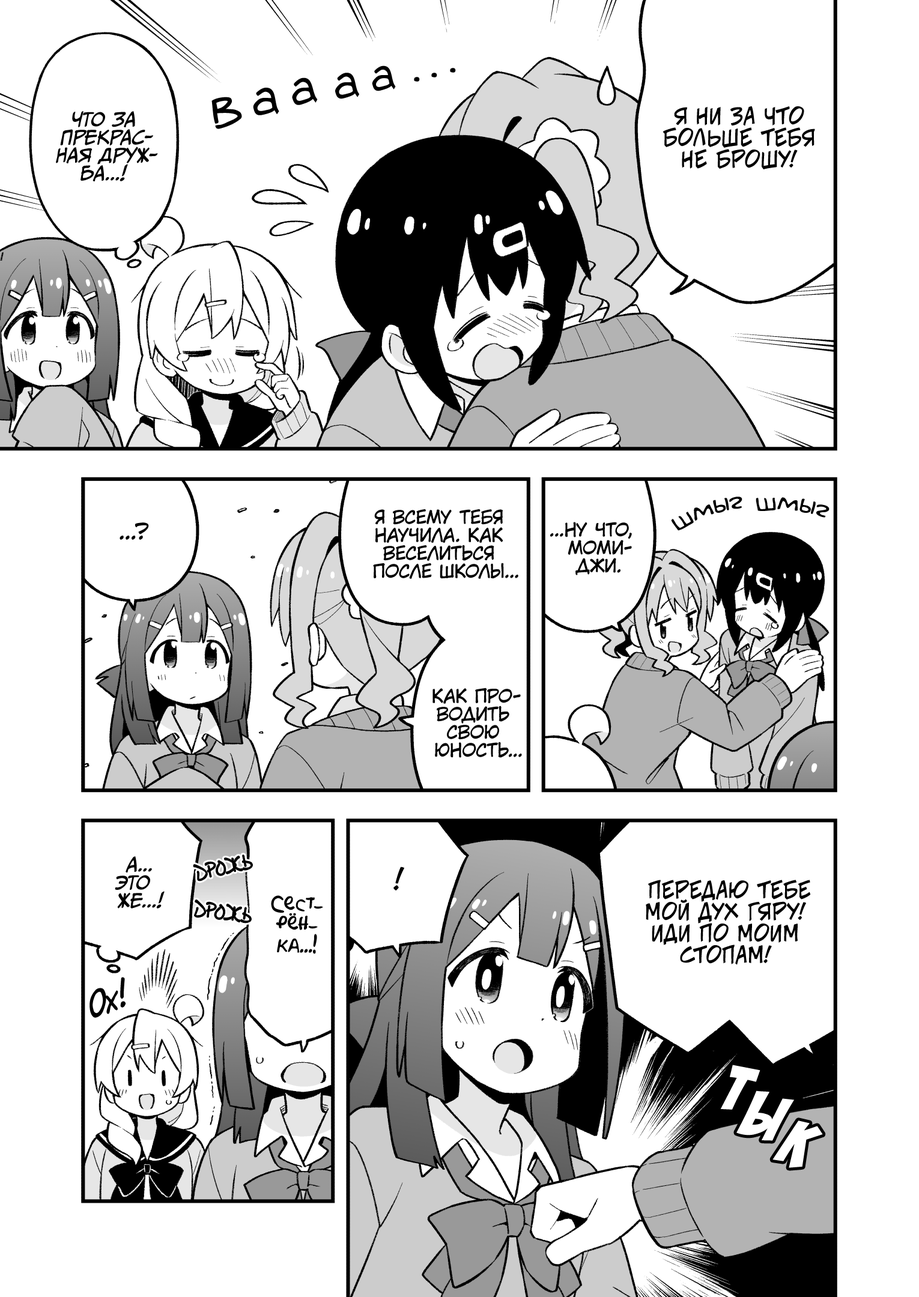
<style>
.page{position:relative;width:919px;height:1297px;background:#ffffff}
.page>*{position:absolute;margin:0}
.t1{font:46.9px "v_Augie";color:#000000}
.t2{font:50.5px "v_Augie";color:#000000}
.t3{font:48.7px "v_Augie";color:#000000}
.t4{font:45.1px "v_Augie";color:#000000}
.t5{font:52.3px "v_Augie";color:#000000}
.t6{font:54.1px "v_Augie";color:#000000}
.t7{font:18px "CCMeanwhile";color:#000000;text-transform:uppercase;font-style:italic}
.t8{font:21.6px "v_CCJeffCampbell";color:#000000;text-transform:uppercase}
.t9{font:25.2px "v_Augie";color:#000000}
.t10{font:18px "KuraiVoice2";color:#000000;text-transform:uppercase}
.t11{font:21.6px "KuraiVoice2";color:#000000;text-transform:uppercase}
.t12{font:21.6px "DSNote";color:#000000;scale:0.7 1}
.t13{font:28.8px "v_CCJeffCampbell";color:#000000;text-transform:uppercase}
.t14{font:19.8px "AkbarPlain";color:#000000}
.t15{font:32.4px "v_CCDearDiary";color:#000000}
.t16{font:72.1px "BadaBoom";color:#ffffff;text-transform:uppercase}
</style>
<div class="page">
<p class="t1" style="left:372px;top:65px;width:24px;height:26px;rotate:-5deg">а</p>
<p class="t2" style="left:292px;top:77px;width:26px;height:28px;rotate:-8deg">а</p>
<p class="t3" style="left:335px;top:73px;width:24px;height:26px;rotate:-5deg">а</p>
<p class="t4" style="left:414px;top:77px;width:6px;height:5px">.</p>
<p class="t4" style="left:431px;top:73px;width:6px;height:4px">.</p>
<p class="t4" style="left:450px;top:68px;width:6px;height:5px">.</p>
<p class="t5" style="left:253px;top:88px;width:26px;height:27px;rotate:-3deg">а</p>
<p class="t6" style="left:211px;top:97px;width:31px;height:32px;rotate:-8deg">в</p>
<p class="t7" style="left:56px;top:111px;width:102px;height:70px;text-align:center">Что за<br>прекрас-<br>ная друж-<br>ба...!</p>
<p class="t8" style="left:663px;top:106px;width:152px;height:63px;text-align:center">Я ни за что<br>больше тебя<br>не брошу!</p>
<p class="t9" style="left:671px;top:497px;width:71px;height:34px;rotate:-19deg">шмыг</p>
<p class="t9" style="left:756px;top:497px;width:74px;height:21px;rotate:6deg">шмыг</p>
<p class="t10" style="left:373px;top:509px;width:145px;height:70px;text-align:center">Я всему тебя<br>научила. Как<br>веселиться<br>после школы...</p>
<p class="t10" style="left:550px;top:522px;width:82px;height:53px;text-align:center">...Ну что,<br>Моми-<br>джи.</p>
<p class="t11" style="left:120px;top:523px;width:29px;height:17px">...?</p>
<p class="t10" style="left:432px;top:688px;width:90px;height:70px;text-align:center">Как про-<br>водить<br>свою<br>юность...</p>
<p class="t7" style="left:115px;top:857px;width:50px;height:52px;text-align:center">А...<br>Это<br>же...!</p>
<p class="t12" style="left:193px;top:855px;width:59px;height:26px;rotate:-12deg">дрожь</p>
<p class="t13" style="left:393px;top:867px;width:11px;height:24px">!</p>
<p class="t8" style="left:646px;top:880px;width:165px;height:85px;text-align:center">Передаю тебе<br>мой дух гяру!<br>Иди по моим<br>стопам!</p>
<p class="t12" style="left:195px;top:900px;width:56px;height:23px;rotate:8deg">дрожь</p>
<p class="t14" style="left:271px;top:896px;width:52px;height:58px;text-align:center">Сест-<br>рён-<br>ка...!</p>
<p class="t15" style="left:90px;top:977px;width:36px;height:41px;rotate:-21deg">Ох!</p>
<p class="t16" style="left:720px;top:1065px;width:40px;height:45px;rotate:18deg">т</p>
<p class="t16" style="left:736px;top:1091px;width:58px;height:50px;rotate:17deg">ы</p>
<p class="t16" style="left:772px;top:1121px;width:51px;height:47px;rotate:24deg">к</p>
</div>
